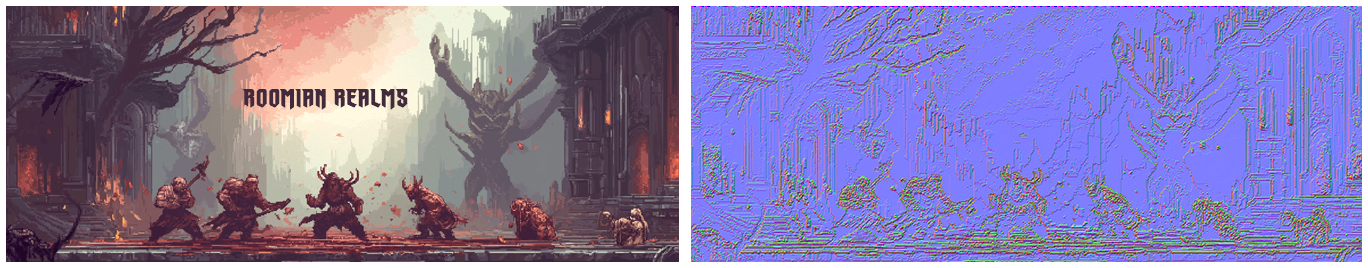
<style>
.page{position:relative;width:1368px;height:268px}
.page>*{position:absolute;margin:0}
.t1{font:24.1px "CCDuskTillDawnRisenW05-Rg";color:#422a3d;font-weight:bold}
</style>
<div class="page">
<p class="t1" style="left:243px;top:89px;width:165px;height:21px">ROOMIAN REALMS</p>
</div>
